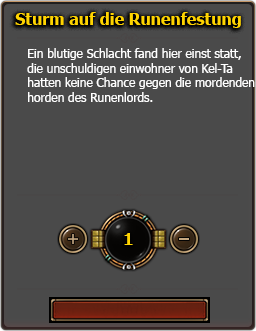
<style>
.page{position:relative;width:256px;height:331px;background:#4a4a4a}
.page>*{position:absolute;margin:0}
.t1{font:16px "Tahoma-Bold";color:#ffd400}
.t2{font:12px "Tahoma";color:#ffffff}
</style>
<div class="page">
<p class="t1" style="left:15px;top:12px;width:226px;height:16px">Sturm auf die Runenfestung</p>
<p class="t2" style="left:27px;top:48px;width:228px;height:54px">Ein blutige Schlacht fand hier einst statt,<br>die unschuldigen einwohner von Kel-Ta<br>hatten keine Chance gegen die mordenden<br>horden des Runenlords.</p>
<p class="t1" style="left:124px;top:233px;width:9px;height:12px">1</p>
</div>
